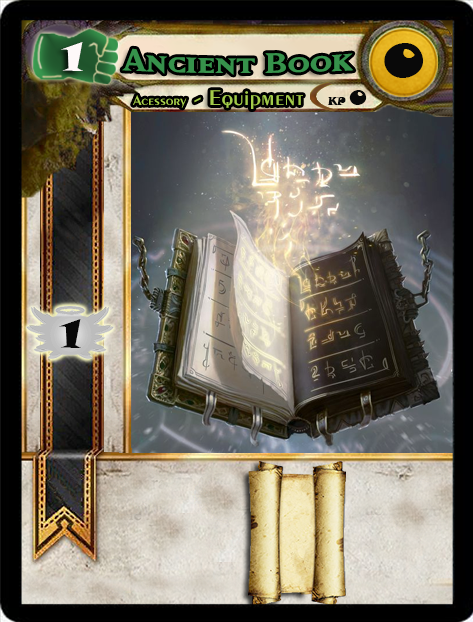
<style>
.page{position:relative;width:473px;height:622px}
.page>*{position:absolute;margin:0}
.t1{font:40px "SnapITC-Regular";color:#fef9f9;scale:1.05 1}
.t2{font:46.6px "SnapITC-Regular";color:#090909;scale:1.05 1}
.t3{font:14.7px "Exotic350BT-DemiBold";color:#abd44e;scale:1.06 1}
.t4{font:22.7px "Exotic350BT-DemiBold";color:#a3cb4a;scale:1.06 1}
.t5{font:10.7px "SnapITC-Regular";color:#090909}
.t6{font:20.5px "SnapITC-Regular";color:#090909}
.t7{font:40px "SnapITC-Regular";color:#090909;scale:1.05 1}
</style>
<div class="page">
<p class="t1" style="left:61px;top:42px;width:22px;height:29px">1</p>
<p class="t2" style="left:384px;top:43px;width:40px;height:35px">0</p>
<p class="t3" style="left:133px;top:95px;width:54px;height:13px">Acessory</p>
<p class="t4" style="left:194px;top:90px;width:109px;height:19px">- Equipment</p>
<p class="t5" style="left:327px;top:97px;width:19px;height:8px">KP</p>
<p class="t6" style="left:349px;top:90px;width:18px;height:15px">0</p>
<p class="t7" style="left:59px;top:319px;width:22px;height:29px">1</p>
</div>
